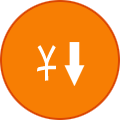
<style>
.page{position:relative;width:120px;height:120px;background:#f77e03}
.page>*{position:absolute;margin:0}
.t1{font:48px "YuppySC-Regular";color:#fffefe}
</style>
<div class="page">
<p class="t1" style="left:37px;top:45px;width:19px;height:36px">¥</p>
</div>
